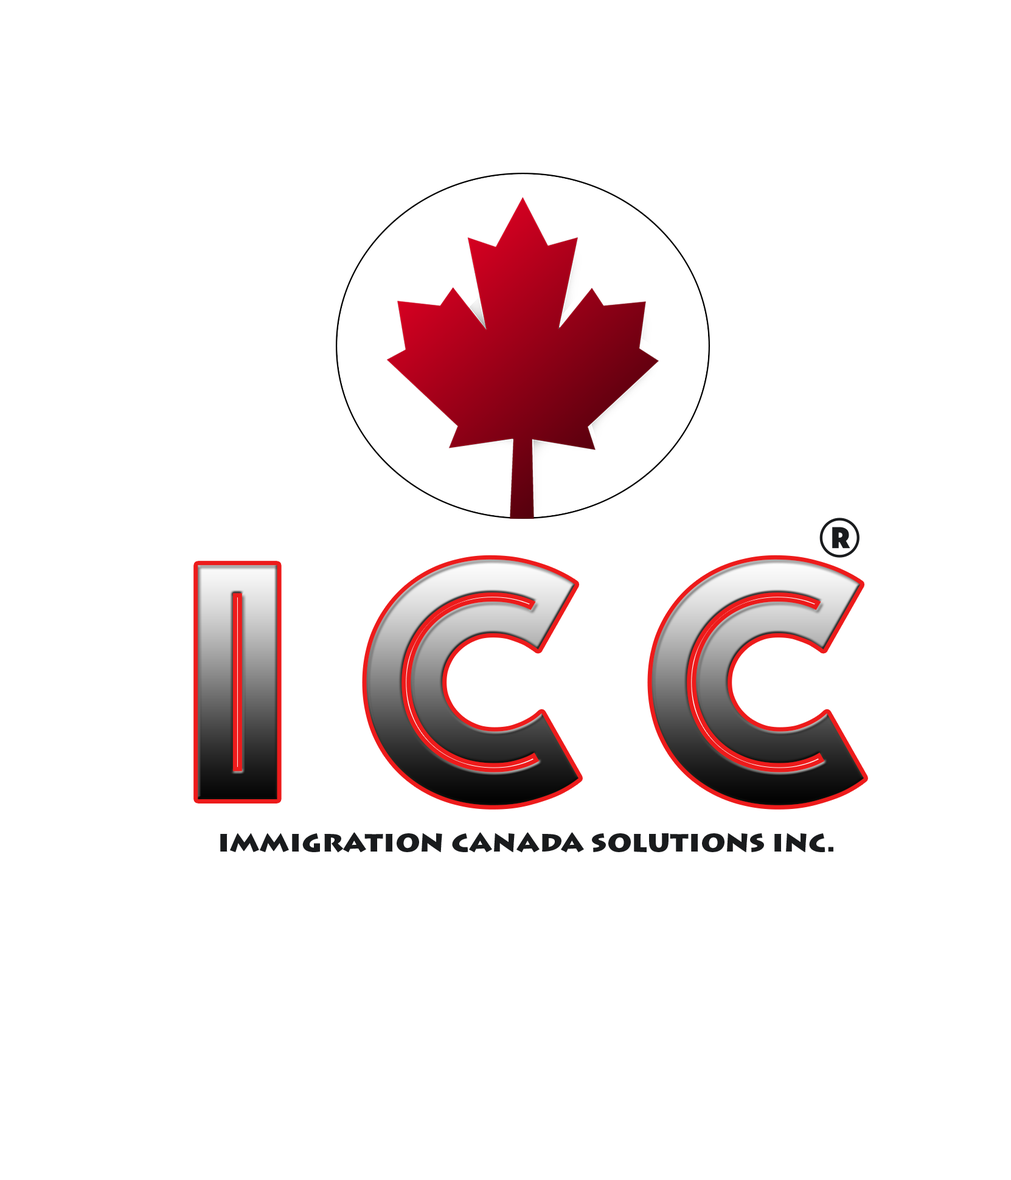
<style>
.page{position:relative;width:1011px;height:1180px;background:#ffffff}
.page>*{position:absolute;margin:0}
.t1{font:70.1px "Phosphate-Inline";color:#191b1d}
.t2{font:350.7px "Phosphate-Inline"}
.t3{font:30.1px "LithosPro-Black";color:#191b1d}
</style>
<div class="page">
<p class="t1" style="left:819px;top:518px;width:40px;height:40px">®</p>
<p class="t2" style="left:198px;top:559px;width:666px;height:246px">I C C</p>
<p class="t3" style="left:220px;top:832px;width:613px;height:21px">immigration canada solutions inc.</p>
</div>
